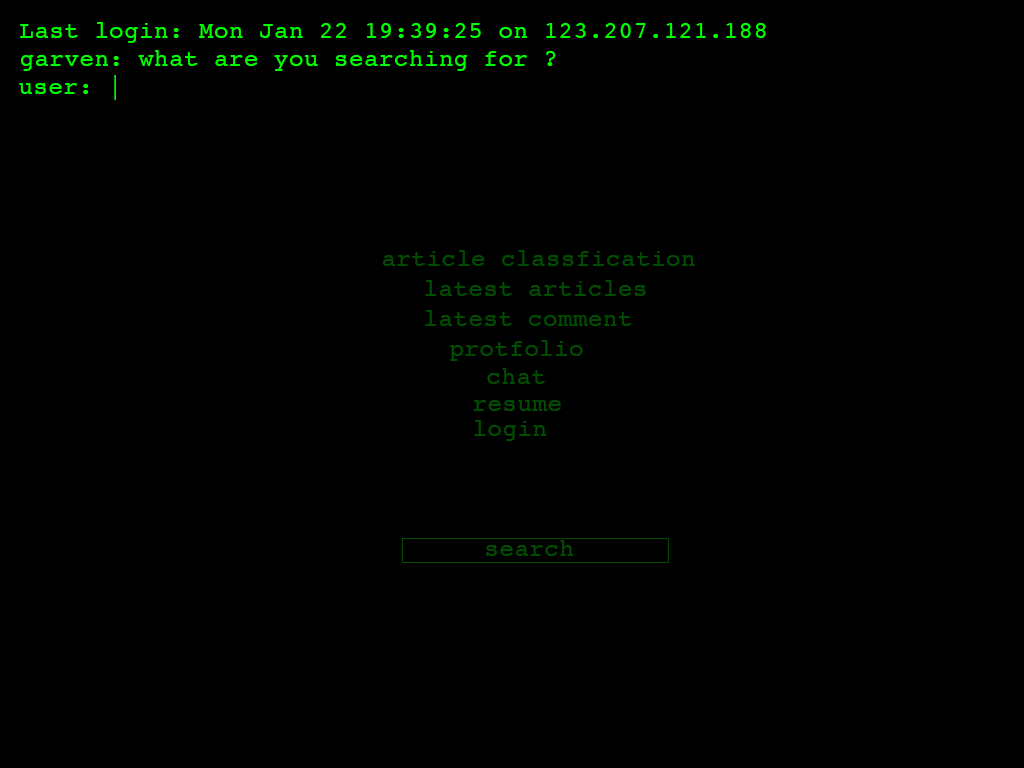
<style>
.page{position:relative;width:1024px;height:768px;background:#000000}
.page>*{position:absolute;margin:0}
.t1{font:24px "Courier";letter-spacing:0.024em;color:#00ff00}
.t2{font:24px "Courier";letter-spacing:0.024em;color:#004c00}
</style>
<div class="page">
<p class="t1" style="left:20px;top:22px;width:746px;height:21px">Last login: Mon Jan 22 19:39:25 on 123.207.121.188</p>
<p class="t1" style="left:21px;top:50px;width:535px;height:21px">garven: what are you searching for ?</p>
<p class="t1" style="left:19px;top:75px;width:97px;height:25px">user: |</p>
<p class="t2" style="left:383px;top:250px;width:312px;height:16px">article classfication</p>
<p class="t2" style="left:425px;top:280px;width:221px;height:16px">latest articles</p>
<p class="t2" style="left:425px;top:310px;width:207px;height:16px">latest comment</p>
<p class="t2" style="left:450px;top:340px;width:133px;height:21px">protfolio</p>
<p class="t2" style="left:487px;top:368px;width:58px;height:16px">chat</p>
<p class="t2" style="left:473px;top:400px;width:88px;height:11px">resume</p>
<p class="t2" style="left:474px;top:420px;width:72px;height:21px">login</p>
<p class="t2" style="left:486px;top:540px;width:87px;height:16px">search</p>
</div>
